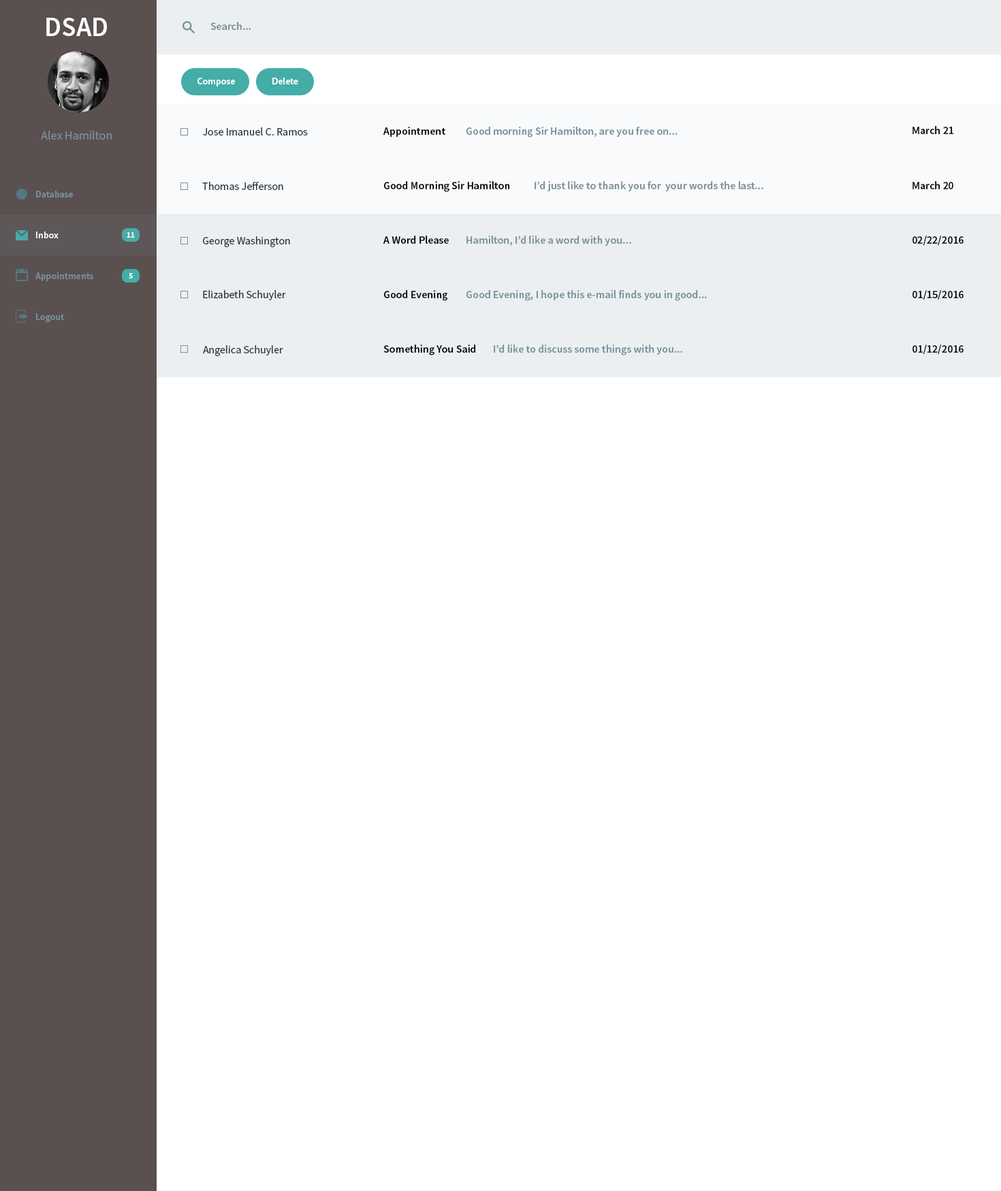
<style>
.page{position:relative;width:1001px;height:1191px;background:#ffffff}
.page>*{position:absolute;margin:0}
.t1{font:27.2px "SourceSansPro-Semibold";color:#ffffff}
.t2{font:10.9px "SourceSansPro-Semibold";color:#78909c}
.t3{font:9.5px "SourceSansPro-Semibold";color:#ffffff}
.t4{font:10.9px "SourceSansPro-Semibold";color:#000000}
.t5{font:12.3px "SourceSansPro-Regular";color:#78909c}
.t6{font:11px "SourceSansPro-Regular";color:#263238}
.t7{font:9.5px "SourceSansPro-Semibold";color:#78909c}
.t8{font:8.2px "SourceSansPro-Bold";color:#f8fafb}
</style>
<div class="page">
<p class="t1" style="left:46px;top:18px;width:61px;height:18px">DSAD</p>
<p class="t2" style="left:210px;top:22px;width:41px;height:8px">Search...</p>
<p class="t3" style="left:197px;top:78px;width:38px;height:8px">Compose</p>
<p class="t3" style="left:272px;top:78px;width:26px;height:6px">Delete</p>
<p class="t4" style="left:913px;top:126px;width:41px;height:8px">March 21</p>
<p class="t5" style="left:41px;top:131px;width:71px;height:9px">Alex Hamilton</p>
<p class="t6" style="left:203px;top:127px;width:105px;height:9px">Jose Imanuel C. Ramos</p>
<p class="t4" style="left:383px;top:127px;width:63px;height:10px">Appointment</p>
<p class="t2" style="left:466px;top:127px;width:212px;height:11px">Good morning Sir Hamilton, are you free on...</p>
<p class="t6" style="left:202px;top:182px;width:81px;height:8px">Thomas Jefferson</p>
<p class="t4" style="left:383px;top:181px;width:127px;height:11px">Good Morning Sir Hamilton</p>
<p class="t2" style="left:535px;top:181px;width:228px;height:10px">I’d just like to thank you for  your words the last...</p>
<p class="t4" style="left:913px;top:181px;width:40px;height:8px">March 20</p>
<p class="t7" style="left:36px;top:191px;width:37px;height:6px">Database</p>
<p class="t3" style="left:36px;top:232px;width:23px;height:6px">Inbox</p>
<p class="t8" style="left:127px;top:232px;width:8px;height:6px">11</p>
<p class="t6" style="left:203px;top:236px;width:87px;height:11px">George Washington</p>
<p class="t4" style="left:383px;top:236px;width:66px;height:8px">A Word Please</p>
<p class="t2" style="left:467px;top:236px;width:164px;height:10px">Hamilton, I’d like a word with you...</p>
<p class="t4" style="left:913px;top:236px;width:51px;height:10px">02/22/2016</p>
<p class="t7" style="left:35px;top:272px;width:58px;height:9px">Appointments</p>
<p class="t8" style="left:129px;top:273px;width:4px;height:6px">5</p>
<p class="t6" style="left:203px;top:290px;width:83px;height:10px">Elizabeth Schuyler</p>
<p class="t4" style="left:383px;top:290px;width:64px;height:11px">Good Evening</p>
<p class="t2" style="left:466px;top:290px;width:241px;height:11px">Good Evening, I hope this e-mail finds you in good...</p>
<p class="t4" style="left:913px;top:290px;width:51px;height:10px">01/15/2016</p>
<p class="t7" style="left:36px;top:313px;width:28px;height:10px">Logout</p>
<p class="t6" style="left:203px;top:345px;width:80px;height:11px">Angelica Schuyler</p>
<p class="t4" style="left:383px;top:345px;width:93px;height:10px">Something You Said</p>
<p class="t2" style="left:494px;top:345px;width:188px;height:10px">I’d like to discuss some things with you...</p>
<p class="t4" style="left:913px;top:345px;width:51px;height:10px">01/12/2016</p>
</div>
